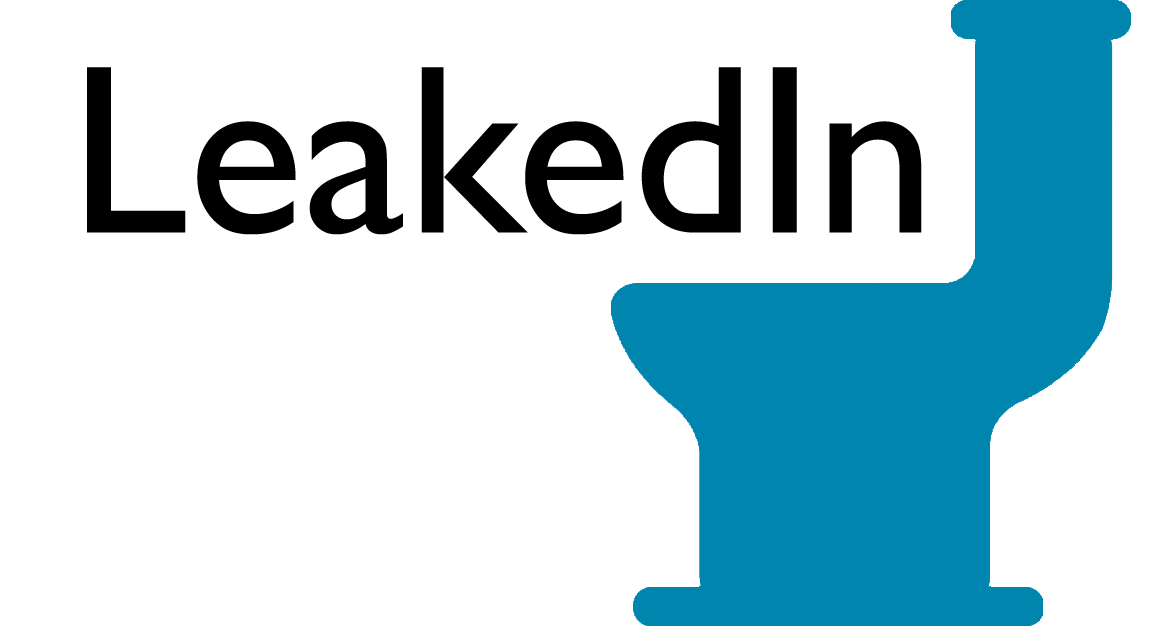
<style>
.page{position:relative;width:1152px;height:626px;background:#ffffff}
.page>*{position:absolute;margin:0}
.t1{font:241.9px "GillSansMT";color:#000000}
</style>
<div class="page">
<p class="t1" style="left:87px;top:67px;width:835px;height:168px">LeakedIn</p>
</div>
